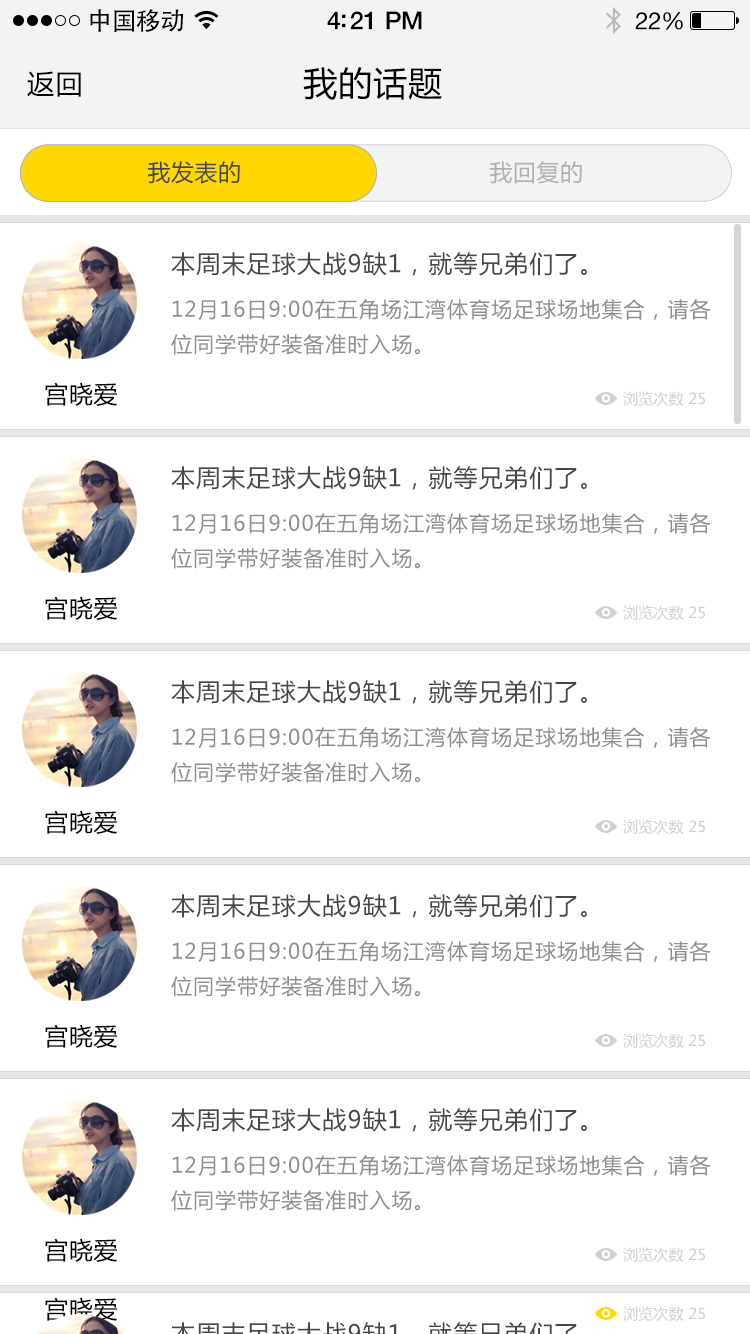
<style>
.page{position:relative;width:750px;height:1334px;background:#ffffff}
.page>*{position:absolute;margin:0}
.t1{font:25px "AdobeHeitiStd-Regular";letter-spacing:-0.025em;color:#000000}
.t2{font:25px "HelveticaNeue-Medium";letter-spacing:-0.02em;color:#000000}
.t3{font:24px "HelveticaNeue";letter-spacing:-0.02em;color:#000000}
.t4{font:27px "MicrosoftYaHei";letter-spacing:0.05em;color:#000000}
.t5{font:34px "MicrosoftYaHei";letter-spacing:0.03em;color:#000000}
.t6{font:23px "MicrosoftYaHei";letter-spacing:0.03em;color:#484848}
.t7{font:23px "MicrosoftYaHei";letter-spacing:0.03em;color:#b0b0b0}
.t8{font:24px "MicrosoftYaHei";letter-spacing:0.05em;color:#555555}
.t9{font:21px/35px "MicrosoftYaHei";letter-spacing:0.05em;color:#8e8e8e}
.t10{font:24px "MicrosoftYaHei";letter-spacing:0.03em;color:#000000}
.t11{font:15px "MicrosoftYaHei";letter-spacing:0.01em;color:#d0d0d0}
</style>
<div class="page">
<p class="t1" style="left:90px;top:9px;width:94px;height:23px">中国移动</p>
<p class="t2" style="left:327px;top:11px;width:95px;height:19px">4:21 PM</p>
<p class="t3" style="left:635px;top:12px;width:48px;height:18px">22%</p>
<p class="t4" style="left:27px;top:71px;width:54px;height:26px">返回</p>
<p class="t5" style="left:303px;top:67px;width:139px;height:33px">我的话题</p>
<p class="t6" style="left:147px;top:161px;width:93px;height:23px">我发表的</p>
<p class="t7" style="left:489px;top:161px;width:93px;height:23px">我回复的</p>
<p class="t8" style="left:171px;top:252px;width:416px;height:24px">本周末足球大战9缺1，就等兄弟们了。</p>
<p class="t9" style="left:171px;top:299px;width:540px;height:56px">12月16日9:00在五角场江湾体育场足球场地集合，请各<br>位同学带好装备准时入场。</p>
<p class="t10" style="left:45px;top:382px;width:73px;height:24px">宫晓爱</p>
<p class="t11" style="left:623px;top:391px;width:82px;height:16px">浏览次数 25</p>
<p class="t8" style="left:171px;top:466px;width:416px;height:24px">本周末足球大战9缺1，就等兄弟们了。</p>
<p class="t9" style="left:171px;top:513px;width:540px;height:56px">12月16日9:00在五角场江湾体育场足球场地集合，请各<br>位同学带好装备准时入场。</p>
<p class="t10" style="left:45px;top:596px;width:73px;height:24px">宫晓爱</p>
<p class="t11" style="left:623px;top:605px;width:82px;height:16px">浏览次数 25</p>
<p class="t8" style="left:171px;top:680px;width:416px;height:24px">本周末足球大战9缺1，就等兄弟们了。</p>
<p class="t9" style="left:171px;top:727px;width:540px;height:56px">12月16日9:00在五角场江湾体育场足球场地集合，请各<br>位同学带好装备准时入场。</p>
<p class="t10" style="left:45px;top:810px;width:73px;height:24px">宫晓爱</p>
<p class="t11" style="left:623px;top:819px;width:82px;height:16px">浏览次数 25</p>
<p class="t8" style="left:171px;top:894px;width:416px;height:24px">本周末足球大战9缺1，就等兄弟们了。</p>
<p class="t9" style="left:171px;top:941px;width:540px;height:56px">12月16日9:00在五角场江湾体育场足球场地集合，请各<br>位同学带好装备准时入场。</p>
<p class="t10" style="left:45px;top:1024px;width:73px;height:24px">宫晓爱</p>
<p class="t11" style="left:623px;top:1033px;width:82px;height:16px">浏览次数 25</p>
<p class="t8" style="left:171px;top:1108px;width:416px;height:24px">本周末足球大战9缺1，就等兄弟们了。</p>
<p class="t9" style="left:171px;top:1155px;width:540px;height:56px">12月16日9:00在五角场江湾体育场足球场地集合，请各<br>位同学带好装备准时入场。</p>
<p class="t10" style="left:45px;top:1238px;width:73px;height:24px">宫晓爱</p>
<p class="t11" style="left:623px;top:1247px;width:82px;height:16px">浏览次数 25</p>
<p class="t10" style="left:45px;top:1297px;width:73px;height:24px">宫晓爱</p>
<p class="t11" style="left:623px;top:1306px;width:82px;height:16px">浏览次数 25</p>
</div>
